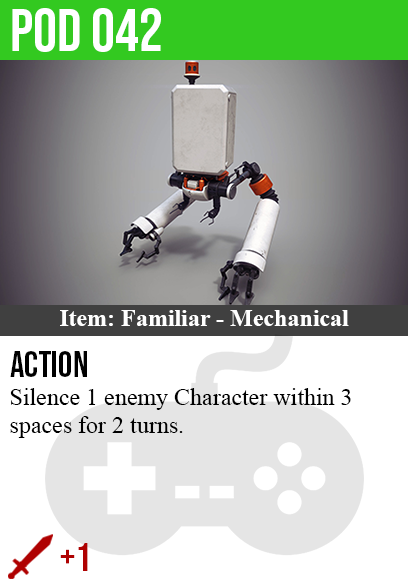
<style>
.page{position:relative;width:408px;height:585px;background:#ffffff}
.page>*{position:absolute;margin:0}
.t1{font:60px "BebasNeue-Regular";color:#ffffff}
.t2{font:24px "TimesNewRomanPS-BoldMT";color:#ffffff}
.t3{font:36px "BebasNeue-Regular";color:#000000}
.t4{font:24px "TimesNewRomanPSMT";color:#000000}
.t5{font:40px "BebasNeue-Regular";color:#af0202}
</style>
<div class="page">
<p class="t1" style="left:12px;top:8px;width:149px;height:44px">pod 042</p>
<p class="t2" style="left:60px;top:310px;width:289px;height:16px">Item: Familiar - Mechanical</p>
<p class="t3" style="left:10px;top:351px;width:77px;height:26px">action</p>
<p class="t4" style="left:10px;top:388px;width:341px;height:50px">Silence 1 enemy Character within 3<br>spaces for 2 turns.</p>
<p class="t5" style="left:60px;top:543px;width:28px;height:28px">+1</p>
</div>
